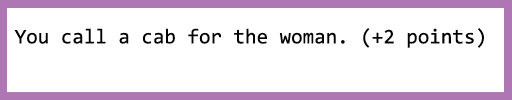
<style>
.page{position:relative;width:512px;height:100px;background:#ffffff}
.page>*{position:absolute;margin:0}
.t1{font:20.9px "Consolas";color:#000000}
</style>
<div class="page">
<p class="t1" style="left:14px;top:28px;width:470px;height:20px">You call a cab for the woman. (+2 points)</p>
</div>
